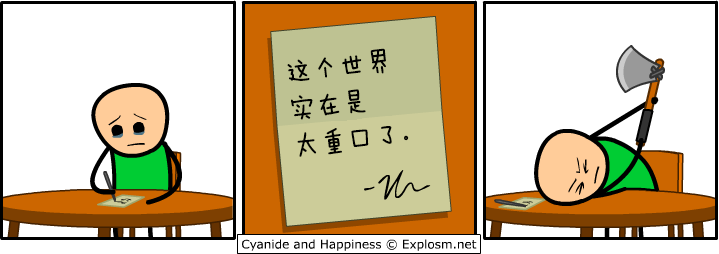
<style>
.page{position:relative;width:719px;height:254px;background:#ffffff}
.page>*{position:absolute;margin:0}
.t1{font:27px/37px "FZMWJW--GB1-0";color:#000000}
</style>
<div class="page">
<p class="t1" style="left:287px;top:48px;width:122px;height:109px;rotate:-6deg">这个世界<br>实在是<br>太重口了。</p>
</div>
